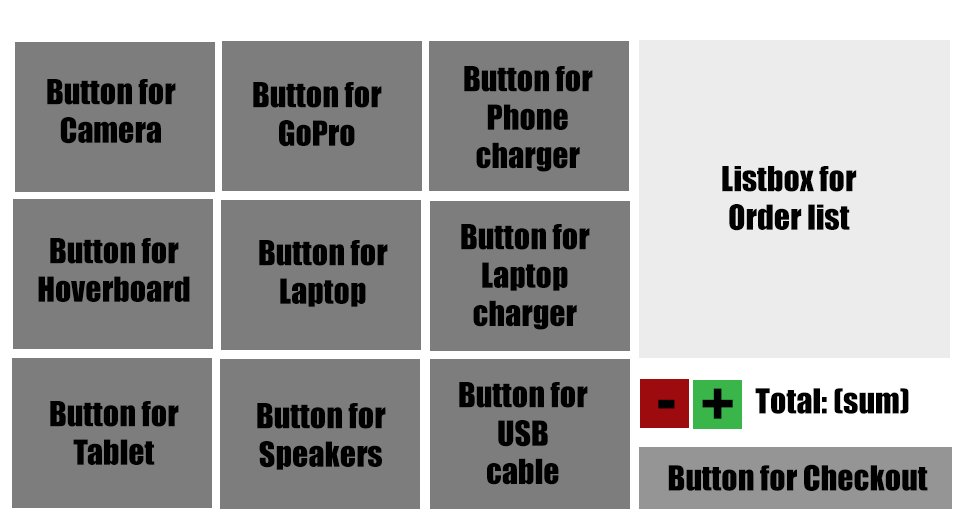
<style>
.page{position:relative;width:966px;height:520px;background:#7d7d7d}
.page>*{position:absolute;margin:0}
.t1{font:32px "Impact";color:#000000}
.t2{font:64px "Impact";color:#000000}
</style>
<div class="page">
<p class="t1" style="left:464px;top:66px;width:129px;height:106px;text-align:center">Button for<br>Phone<br>charger</p>
<p class="t1" style="left:47px;top:79px;width:129px;height:65px;text-align:center">Button for<br>Camera</p>
<p class="t1" style="left:253px;top:82px;width:129px;height:65px;text-align:center">Button for<br>GoPro</p>
<p class="t1" style="left:722px;top:166px;width:135px;height:65px;text-align:center">Listbox for<br>Order list</p>
<p class="t1" style="left:461px;top:224px;width:129px;height:106px;text-align:center">Button for<br>Laptop<br>charger</p>
<p class="t1" style="left:38px;top:238px;width:152px;height:64px;text-align:center">Button for<br>Hoverboard</p>
<p class="t1" style="left:259px;top:240px;width:129px;height:67px;text-align:center">Button for<br>Laptop</p>
<p class="t1" style="left:459px;top:382px;width:129px;height:103px;text-align:center">Button for<br>USB<br>cable</p>
<p class="t2" style="left:702px;top:388px;width:31px;height:31px">+</p>
<p class="t1" style="left:755px;top:388px;width:154px;height:26px">Total: (sum)</p>
<p class="t1" style="left:50px;top:401px;width:129px;height:64px;text-align:center">Button for<br>Tablet</p>
<p class="t2" style="left:658px;top:399px;width:17px;height:10px">-</p>
<p class="t1" style="left:257px;top:403px;width:129px;height:67px;text-align:center">Button for<br>Speakers</p>
<p class="t1" style="left:668px;top:464px;width:260px;height:27px">Button for Checkout</p>
</div>
